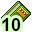
<style>
.page{position:relative;width:32px;height:32px;background:#ffffff}
.page>*{position:absolute;margin:0}
.t1{font:18px "Arial-BoldMT";color:#000000}
</style>
<div class="page">
<p class="t1" style="left:2px;top:18px;width:19px;height:13px">10</p>
</div>
